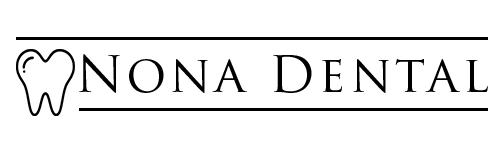
<style>
.page{position:relative;width:500px;height:150px;background:#ffffff}
.page>*{position:absolute;margin:0}
.t1{font:50px "TrajanPro-Regular";letter-spacing:0.075em;color:#000000}
</style>
<div class="page">
<p class="t1" style="left:79px;top:54px;width:409px;height:39px">Nona Dental</p>
</div>
